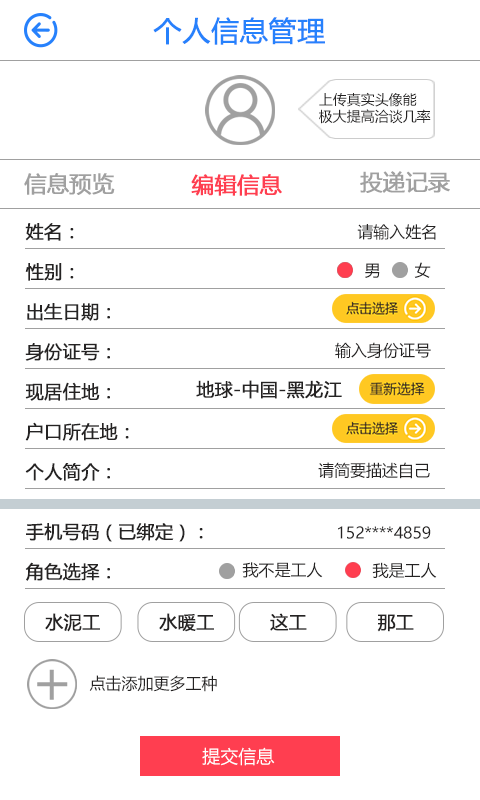
<style>
.page{position:relative;width:480px;height:800px;background:#ffffff}
.page>*{position:absolute;margin:0}
.t1{font:28px "MicrosoftYaHei";color:#2681fc;font-weight:bold}
.t2{font:14px "MicrosoftYaHei";color:#252323}
.t3{font:22px "MicrosoftYaHei";color:#a0a0a0;font-weight:bold}
.t4{font:22px "MicrosoftYaHei";color:#ff3e50;font-weight:bold}
.t5{font:18px "MicrosoftYaHei";color:#252323;font-weight:bold}
.t6{font:16px "MicrosoftYaHei";color:#252323}
.t7{font:18px "MicrosoftYaHei";color:#ffffff}
</style>
<div class="page">
<p class="t1" style="left:153px;top:17px;width:172px;height:28px">个人信息管理</p>
<p class="t2" style="left:319px;top:92px;width:112px;height:32px">上传真实头像能<br>极大提高洽谈几率</p>
<p class="t3" style="left:24px;top:173px;width:91px;height:22px">信息预览</p>
<p class="t4" style="left:191px;top:174px;width:91px;height:22px">编辑信息</p>
<p class="t3" style="left:360px;top:171px;width:90px;height:22px">投递记录</p>
<p class="t5" style="left:25px;top:223px;width:49px;height:18px">姓名：</p>
<p class="t6" style="left:357px;top:224px;width:79px;height:16px">请输入姓名</p>
<p class="t5" style="left:25px;top:263px;width:49px;height:18px">性别：</p>
<p class="t6" style="left:365px;top:263px;width:15px;height:15px">男</p>
<p class="t6" style="left:414px;top:262px;width:17px;height:16px">女</p>
<p class="t5" style="left:27px;top:303px;width:83px;height:18px">出生日期：</p>
<p class="t6" style="left:335px;top:342px;width:96px;height:17px">输入身份证号</p>
<p class="t5" style="left:25px;top:343px;width:85px;height:18px">身份证号：</p>
<p class="t5" style="left:25px;top:382px;width:85px;height:19px">现居住地：</p>
<p class="t5" style="left:196px;top:380px;width:146px;height:19px">地球-中国-黑龙江</p>
<p class="t5" style="left:25px;top:422px;width:104px;height:19px">户口所在地：</p>
<p class="t6" style="left:318px;top:462px;width:112px;height:17px">请简要描述自己</p>
<p class="t5" style="left:25px;top:463px;width:85px;height:18px">个人简介：</p>
<p class="t5" style="left:26px;top:523px;width:177px;height:19px">手机号码（已绑定）：</p>
<p class="t6" style="left:338px;top:526px;width:93px;height:13px">152****4859</p>
<p class="t5" style="left:25px;top:562px;width:85px;height:19px">角色选择：</p>
<p class="t6" style="left:242px;top:562px;width:81px;height:16px">我不是工人</p>
<p class="t6" style="left:372px;top:562px;width:65px;height:17px">我是工人</p>
<p class="t5" style="left:45px;top:613px;width:55px;height:19px">水泥工</p>
<p class="t5" style="left:159px;top:613px;width:55px;height:19px">水暖工</p>
<p class="t5" style="left:270px;top:613px;width:37px;height:18px">这工</p>
<p class="t5" style="left:377px;top:614px;width:37px;height:18px">那工</p>
<p class="t6" style="left:89px;top:675px;width:128px;height:17px">点击添加更多工种</p>
<p class="t7" style="left:202px;top:747px;width:73px;height:19px">提交信息</p>
</div>
